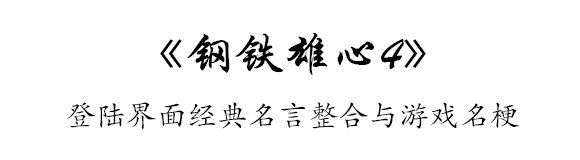
<style>
.page{position:relative;width:580px;height:160px;background:#ffffff}
.page>*{position:absolute;margin:0}
.t1{font:48px "STXingkai";letter-spacing:0.01em;color:#000000}
.t2{font:30px "FZKTJW--GB1-0";letter-spacing:0.01em;color:#000000}
</style>
<div class="page">
<p class="t1" style="left:160px;top:33px;width:266px;height:42px">《钢铁雄心4》</p>
<p class="t2" style="left:67px;top:102px;width:453px;height:28px">登陆界面经典名言整合与游戏名梗</p>
</div>
